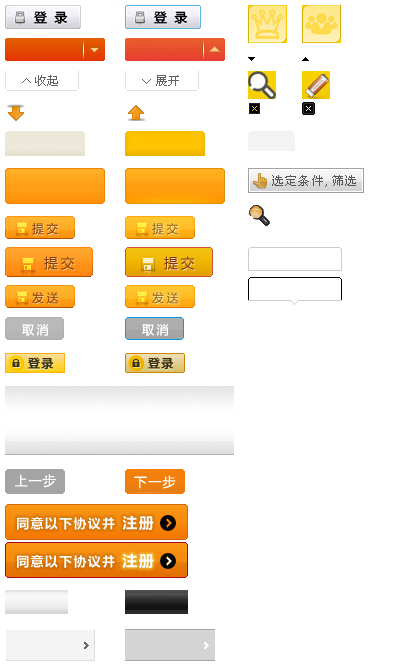
<style>
.page{position:relative;width:400px;height:670px;background:#ffffff}
.page>*{position:absolute;margin:0}
.t1{font:12px "SimSun";letter-spacing:0.1em;color:#565656}
.t2{font:12px "MicrosoftYaHei";letter-spacing:0.2em;color:#843a06}
.t3{font:12px "MicrosoftYaHei";letter-spacing:0.2em;color:#f7e1bc}
.t4{font:12px "MicrosoftYaHei";letter-spacing:0.2em;color:#925e03}
.t5{font:12px "MicrosoftYaHei";letter-spacing:0.2em;color:#fbdba4}
.t6{font:14px "MicrosoftYaHei";letter-spacing:0.2em;color:#843a06}
.t7{font:14px "MicrosoftYaHei";letter-spacing:0.2em;color:#fbce80}
.t8{font:14px "MicrosoftYaHei";letter-spacing:0.2em;color:#823803}
.t9{font:14px "MicrosoftYaHei";letter-spacing:0.2em}
.t10{font:12px "MicrosoftYaHei";letter-spacing:0.2em}
.t11{font:12px "MicrosoftYaHei";letter-spacing:0.2em;color:#ffffff}
.t12{font:12px "MicrosoftYaHei";letter-spacing:0.2em;color:#fefefe}
.t13{font:12px "MicrosoftYaHei";letter-spacing:0.1em;color:#372d03}
.t14{font:13px "MicrosoftYaHei";letter-spacing:0.1em;color:#ffffff}
.t15{font:13px "MicrosoftYaHei";letter-spacing:0.1em;color:#fefefe}
.t16{font:15px "MicrosoftYaHei";letter-spacing:0.1em;color:#fefefe}
.t17{font:15px "MicrosoftYaHei";letter-spacing:0.1em;color:#feffff}
</style>
<div class="page">
<p class="t1" style="left:272px;top:175px;width:84px;height:12px">选定条件,筛选</p>
<p class="t2" style="left:32px;top:223px;width:26px;height:12px">提交</p>
<p class="t3" style="left:33px;top:224px;width:26px;height:12px">提交</p>
<p class="t4" style="left:152px;top:223px;width:26px;height:12px">提交</p>
<p class="t5" style="left:153px;top:224px;width:26px;height:12px">提交</p>
<p class="t6" style="left:44px;top:256px;width:31px;height:14px">提交</p>
<p class="t7" style="left:45px;top:257px;width:31px;height:14px">提交</p>
<p class="t8" style="left:164px;top:256px;width:31px;height:14px">提交</p>
<p class="t9" style="left:165px;top:257px;width:31px;height:14px">提交</p>
<p class="t2" style="left:32px;top:292px;width:27px;height:12px">发送</p>
<p class="t10" style="left:33px;top:293px;width:27px;height:12px">发送</p>
<p class="t4" style="left:152px;top:292px;width:27px;height:12px">发送</p>
<p class="t10" style="left:153px;top:293px;width:27px;height:12px">发送</p>
<p class="t11" style="left:22px;top:324px;width:26px;height:12px">取消</p>
<p class="t12" style="left:22px;top:324px;width:26px;height:12px">取消</p>
<p class="t11" style="left:142px;top:324px;width:26px;height:12px">取消</p>
<p class="t11" style="left:142px;top:324px;width:26px;height:12px">取消</p>
<p class="t13" style="left:28px;top:357px;width:25px;height:13px">登录</p>
<p class="t13" style="left:148px;top:357px;width:25px;height:13px">登录</p>
<p class="t14" style="left:134px;top:475px;width:42px;height:14px">下一步</p>
<p class="t15" style="left:17px;top:517px;width:98px;height:13px">同意以下协议并</p>
<p class="t16" style="left:122px;top:515px;width:32px;height:16px">注册</p>
<p class="t15" style="left:17px;top:555px;width:98px;height:13px">同意以下协议并</p>
<p class="t17" style="left:122px;top:553px;width:32px;height:16px">注册</p>
</div>
